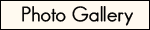
<style>
.page{position:relative;width:150px;height:30px;background:#fffaf0}
.page>*{position:absolute;margin:0}
.t1{font:20px "GeosansLight";color:#000000;font-weight:bold}
</style>
<div class="page">
<p class="t1" style="left:22px;top:6px;width:111px;height:20px">Photo Gallery</p>
</div>
